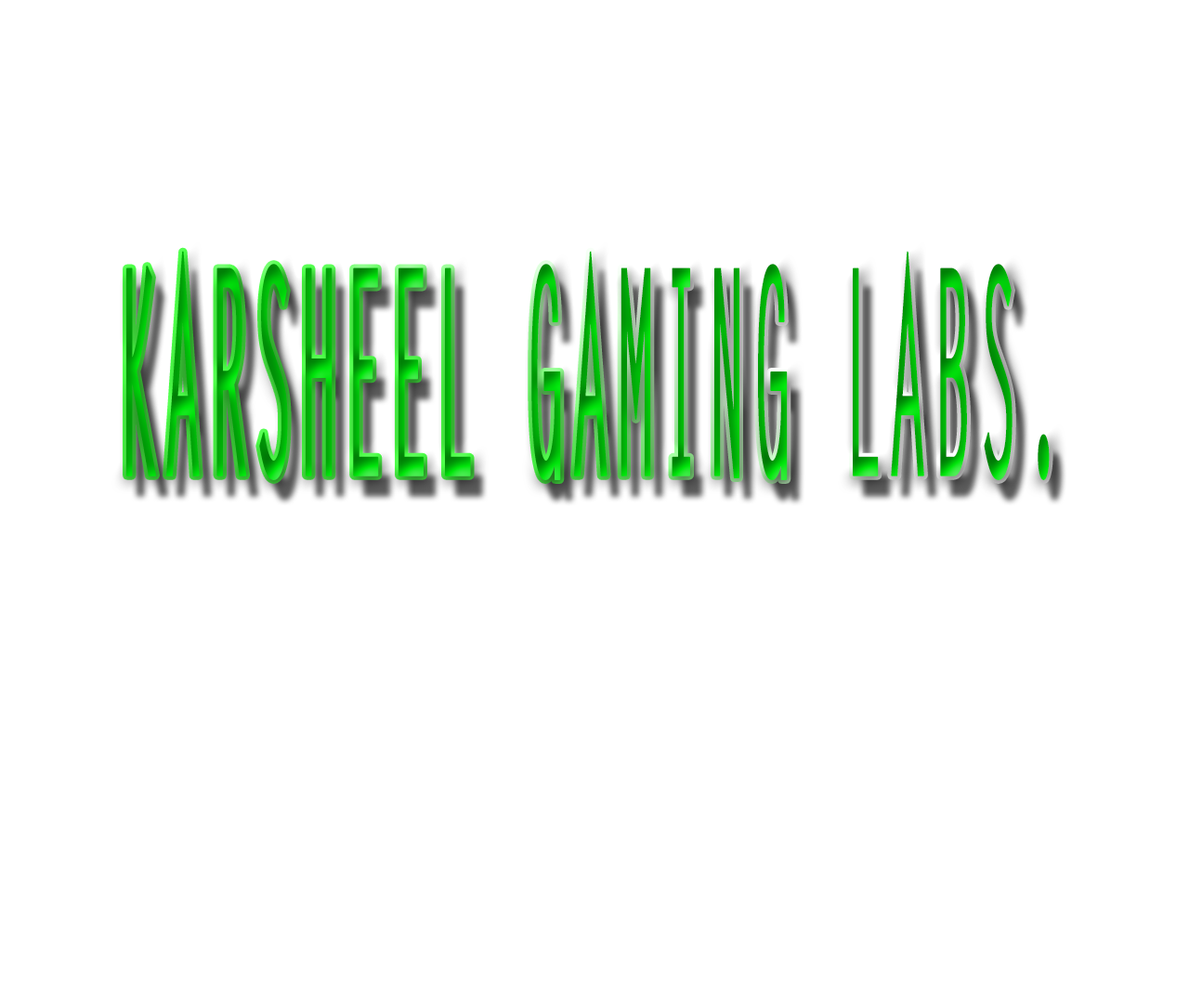
<style>
.page{position:relative;width:1189px;height:1003px;background:#ffffff}
.page>*{position:absolute;margin:0}
.t1{font:287.2px "LetterGothicStd-Bold";letter-spacing:0.1em;text-transform:uppercase;font-weight:bold;scale:0.22 1}
</style>
<div class="page">
<p class="t1" style="left:126px;top:251px;width:923px;height:229px">Karsheel Gaming Labs.</p>
</div>
